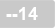
<style>
.page{position:relative;width:55px;height:28px;background:#c9c9c9}
.page>*{position:absolute;margin:0}
.t1{font:18.2px "Arial-BoldMT";color:#ffffff}
</style>
<div class="page">
<p class="t1" style="left:6px;top:7px;width:32px;height:13px">--14</p>
</div>
